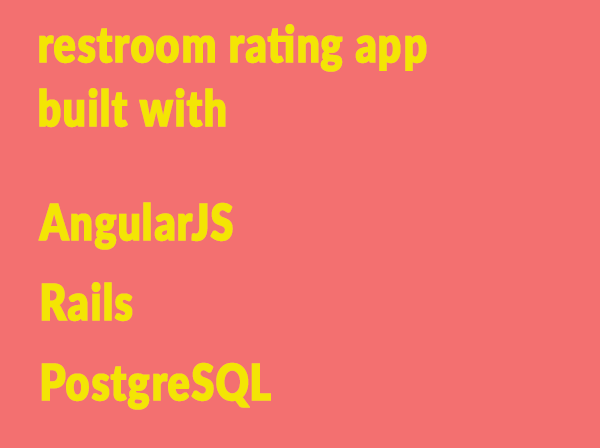
<style>
.page{position:relative;width:600px;height:448px;background:#f37070}
.page>*{position:absolute;margin:0}
.t1{font:50.4px/16px "Lato-Black";letter-spacing:0.01em;color:#f3e504;font-weight:bold;scale:0.81 1}
</style>
<div class="page">
<p class="t1" style="left:39px;top:24px;width:388px;height:104px">restroom rating app<br><br><br><br>built with</p>
<p class="t1" style="left:38px;top:202px;width:233px;height:208px">AngularJS<br><br><br><br><br>Rails<br><br><br><br><br>PostgreSQL</p>
</div>
